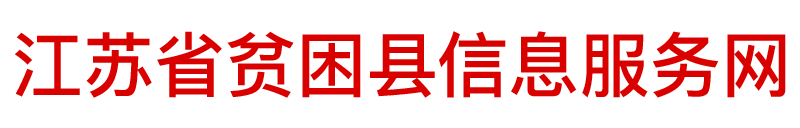
<style>
.page{position:relative;width:800px;height:128px;background:#ffffff}
.page>*{position:absolute;margin:0}
.t1{font:70.8px "PingFangSC-Medium";color:#d90000}
</style>
<div class="page">
<p class="t1" style="left:15px;top:31px;width:771px;height:67px">江苏省贫困县信息服务网</p>
</div>
